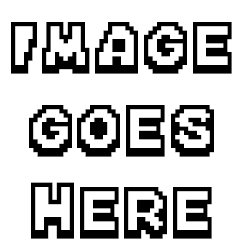
<style>
.page{position:relative;width:250px;height:250px;background:#ffffff}
.page>*{position:absolute;margin:0}
.t1{font:69px "Mario-Kart-DS";color:#000000}
</style>
<div class="page">
<p class="t1" style="left:11px;top:22px;width:221px;height:217px;text-align:center">IMAGE<br>GOES<br>HERE</p>
</div>
